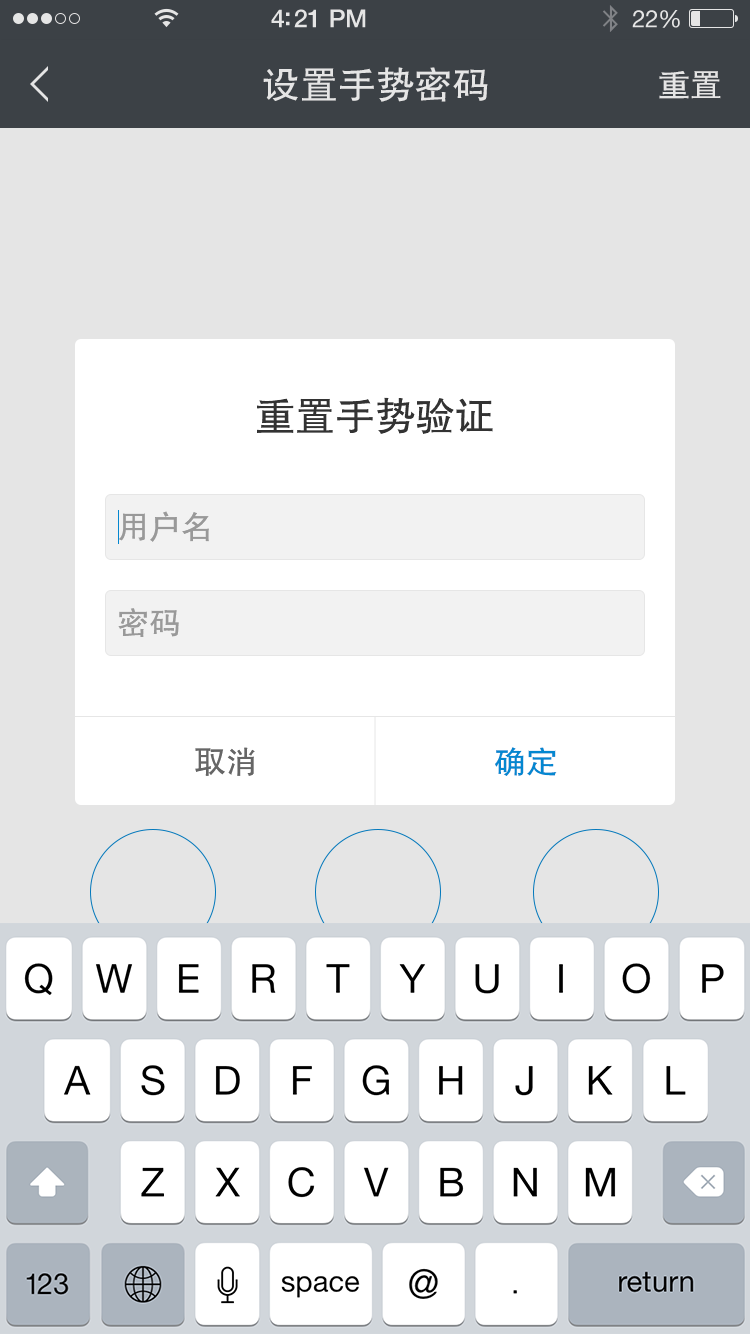
<style>
.page{position:relative;width:750px;height:1334px;background:#ffffff}
.page>*{position:absolute;margin:0}
.t1{font:38px "FZHTJW--GB1-0";color:#e5e5e5}
.t2{font:32px "FZHTJW--GB1-0";color:#e5e5e5}
.t3{font:40px "FZHTJW--GB1-0";color:#333333}
.t4{font:32px "FZHTJW--GB1-0";color:#999999}
.t5{font:32px "FZHTJW--GB1-0";color:#666666}
.t6{font:32px "FZHTJW--GB1-0";color:#0487d0}
</style>
<div class="page">
<p class="t1" style="left:263px;top:67px;width:225px;height:35px">设置手势密码</p>
<p class="t2" style="left:659px;top:71px;width:62px;height:28px">重置</p>
<p class="t3" style="left:257px;top:397px;width:236px;height:37px">重置手势验证</p>
<p class="t4" style="left:118px;top:511px;width:91px;height:31px">用户名</p>
<p class="t4" style="left:118px;top:608px;width:61px;height:29px">密码</p>
<p class="t5" style="left:195px;top:747px;width:60px;height:29px">取消</p>
<p class="t6" style="left:495px;top:747px;width:62px;height:29px">确定</p>
</div>
